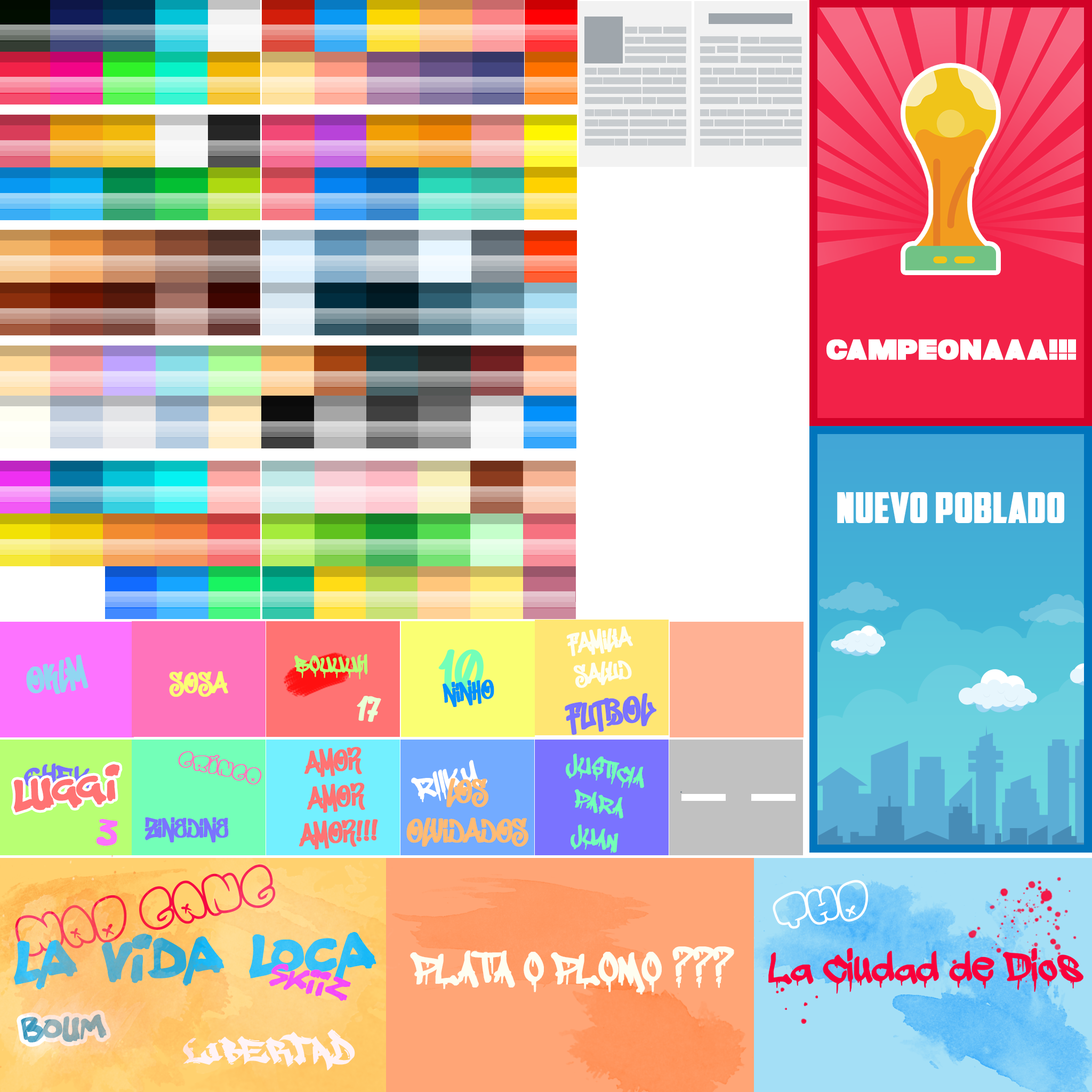
<style>
.page{position:relative;width:1092px;height:1092px}
.page>*{position:absolute;margin:0}
.t1{font:29.3px "Folklore";color:#ffffff;text-transform:uppercase;font-weight:bold}
.t2{font:41.6px "AmericanCaptain";color:#ffffff;text-transform:uppercase;font-weight:bold}
.t3{font:26.7px "DonGraffitiRegular";color:#fefef1;text-transform:uppercase;font-weight:bold}
.t4{font:36.8px "DonGraffitiRegular";color:#7a73ff;text-transform:uppercase;font-weight:bold}
.t5{font:26.7px "adrippingmarker";color:#b8ff73;text-transform:uppercase;font-weight:bold}
.t6{font:59.7px "DonGraffitiRegular";color:#73ffb8;text-transform:uppercase;font-weight:bold}
.t7{font:36.2px "DonGraffitiRegular";color:#91d6f2;text-transform:uppercase;font-weight:bold}
.t8{font:29px "DonGraffitiRegular";color:#faff73;text-transform:uppercase;font-weight:bold}
.t9{font:26.7px "DonGraffitiRegular";color:#0391fb;text-transform:uppercase;font-weight:bold}
.t10{font:35.8px "DonGraffitiRegular";color:#eaffd5;text-transform:uppercase;font-weight:bold}
.t11{font:29.9px "DonGraffitiRegular";color:#ff7373;text-transform:uppercase;font-weight:bold}
.t12{font:26.7px "BOMBFONT";color:#ff73bb;text-transform:uppercase;font-weight:bold}
.t13{font:38.3px "adrippingmarker";color:#ffffff;text-transform:uppercase;font-weight:bold}
.t14{font:28.5px "adrippingmarker";color:#73ffb8;text-transform:uppercase;font-weight:bold}
.t15{font:36.8px "SplatterKings";color:#ff7373;text-transform:uppercase;font-weight:bold}
.t16{font:36.8px "adrippingmarker";text-transform:uppercase;font-weight:bold}
.t17{font:32.9px "DonGraffitiRegular";color:#ffbb73;text-transform:uppercase;font-weight:bold}
.t18{font:33.4px "SplatterKings";color:#fd73ff;text-transform:uppercase;font-weight:bold}
.t19{font:26.7px "DonGraffitiRegular";color:#7a73ff;text-transform:uppercase;font-weight:bold}
.t20{font:58px "BOMBFONT";color:#ffffff;text-transform:uppercase;font-weight:bold}
.t21{font:50.2px "adrippingmarker";color:#fefef1;font-weight:bold}
</style>
<div class="page">
<p class="t1" style="left:826px;top:339px;width:250px;height:21px">campeonaaa!!!</p>
<p class="t2" style="left:837px;top:492px;width:227px;height:31px">nuevo poblado</p>
<p class="t3" style="left:565px;top:626px;width:92px;height:109px;text-align:center;rotate:-7deg">familia<br>salud<br><span class="t4">futbol</span></p>
<p class="t5" style="left:294px;top:654px;width:74px;height:25px">BOUUUH</p>
<p class="t6" style="left:438px;top:649px;width:46px;height:43px">10</p>
<p class="t7" style="left:26px;top:655px;width:63px;height:39px;rotate:-12deg">OKLM</p>
<p class="t8" style="left:169px;top:671px;width:59px;height:26px">SOSA</p>
<p class="t9" style="left:443px;top:679px;width:51px;height:28px;rotate:-6deg">NINHO</p>
<p class="t10" style="left:357px;top:696px;width:24px;height:26px;rotate:9deg">17</p>
<p class="t11" style="left:299px;top:746px;width:79px;height:104px;text-align:center;rotate:-5deg">amor<br>amor<br>amor!!!</p>
<p class="t12" style="left:178px;top:751px;width:84px;height:34px;rotate:14deg">gringo</p>
<p class="t13" style="left:411px;top:760px;width:76px;height:42px;rotate:-14deg">riiky</p>
<p class="t14" style="left:566px;top:753px;width:78px;height:100px;text-align:center;rotate:12deg">justicia <br>para <br>juan</p>
<p class="t15" style="left:14px;top:764px;width:106px;height:49px;rotate:-8deg">luggi</p>
<p class="t16" style="left:24px;top:763px;width:70px;height:35px">ghek</p>
<p class="t17" style="left:406px;top:778px;width:122px;height:69px;text-align:center">los<br>olvidados</p>
<p class="t18" style="left:96px;top:819px;width:22px;height:27px;rotate:16deg">3</p>
<p class="t19" style="left:144px;top:817px;width:85px;height:25px">zinedine</p>
<p class="t20" style="left:773px;top:880px;width:96px;height:49px;rotate:-8deg">THD</p>
<p class="t21" style="left:410px;top:946px;width:324px;height:48px">PLATA O PLOMO ???</p>
</div>
